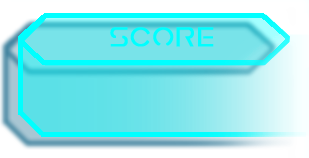
<style>
.page{position:relative;width:309px;height:158px}
.page>*{position:absolute;margin:0}
.t1{font:30px "EarthOrbiter";color:#00ffff;font-weight:bold}
</style>
<div class="page">
<p class="t1" style="left:110px;top:27px;width:104px;height:20px">score</p>
</div>
